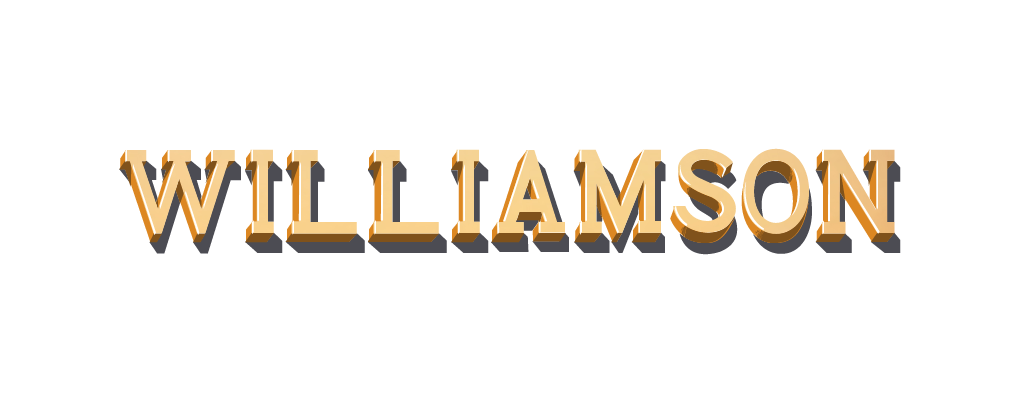
<style>
.page{position:relative;width:1020px;height:400px;background:#ffffff}
.page>*{position:absolute;margin:0}
.t1{font:125px "Monstre-Midtone"}
.t2{font:125px "Monstre-CastShadow";color:#4c4c53}
.t3{font:125px "Monstre-CoreShadow";color:#80521b}
</style>
<div class="page">
<p class="t1" style="left:120px;top:150px;width:759px;height:93px">williamson</p>
<p class="t2" style="left:119px;top:160px;width:782px;height:95px">williamson</p>
<p class="t3" style="left:119px;top:160px;width:776px;height:83px">williamson</p>
</div>
